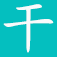
<style>
.page{position:relative;width:57px;height:57px;background:#04bfbf}
.page>*{position:absolute;margin:0}
.t1{font:60px "STKaiti";color:#f9fafb}
</style>
<div class="page">
<p class="t1" style="left:3px;top:4px;width:51px;height:49px">干</p>
</div>
